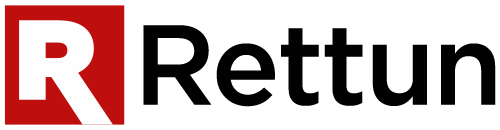
<style>
.page{position:relative;width:500px;height:130px;background:#ffffff}
.page>*{position:absolute;margin:0}
.t1{font:113.5px "Gotham-Medium";letter-spacing:-0.025em;color:#010101}
</style>
<div class="page">
<p class="t1" style="left:143px;top:25px;width:353px;height:82px">Rettun</p>
</div>
